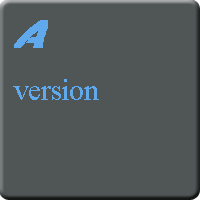
<style>
.page{position:relative;width:200px;height:200px;background:#505656}
.page>*{position:absolute;margin:0}
.t1{font:30px "TimesNewRomanPSMT";color:#61a9ed}
</style>
<div class="page">
<p class="t1" style="left:13px;top:79px;width:86px;height:21px">version</p>
</div>
